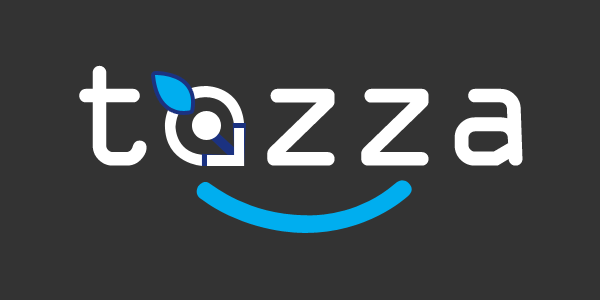
<style>
.page{position:relative;width:600px;height:300px;background:#333333}
.page>*{position:absolute;margin:0}
.t1{font:162.2px "OCRAExtended";letter-spacing:-0.025em;color:#ffffff}
</style>
<div class="page">
<p class="t1" style="left:79px;top:65px;width:444px;height:101px">t zza</p>
</div>
